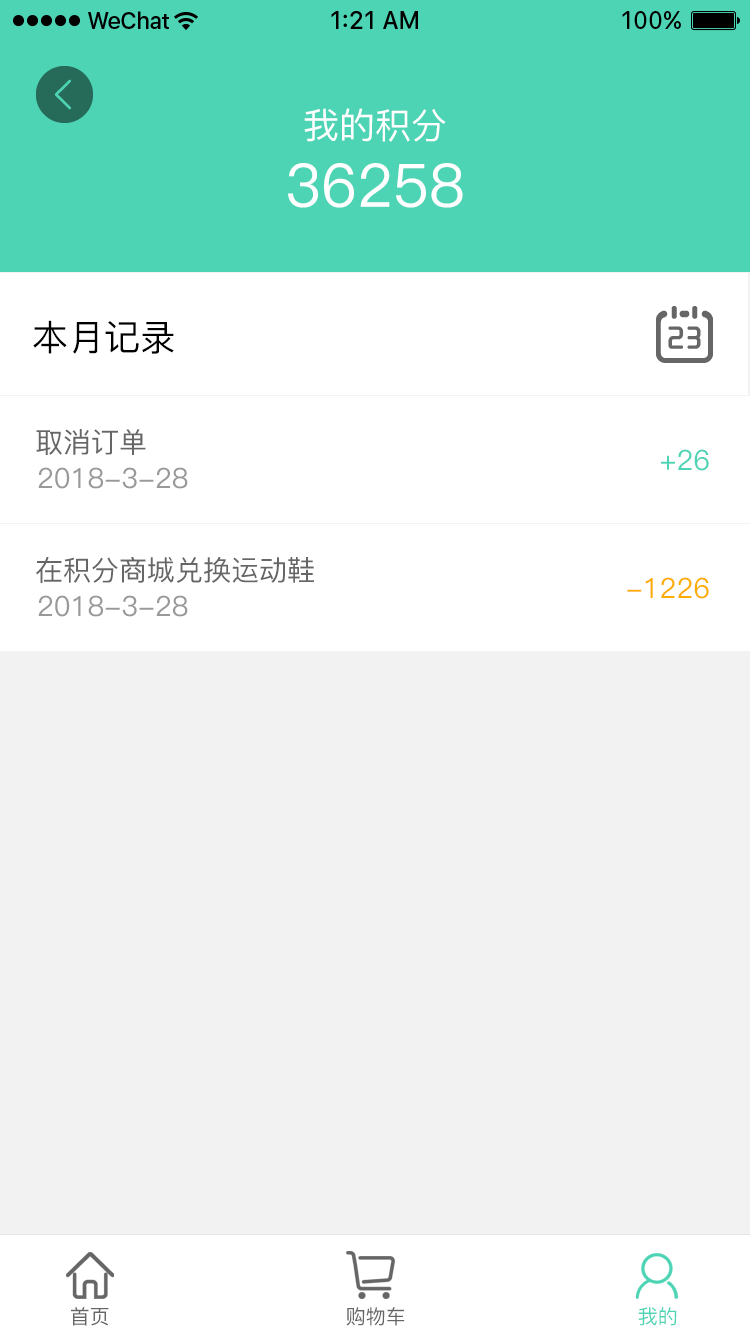
<style>
.page{position:relative;width:750px;height:1334px;background:#f2f2f2}
.page>*{position:absolute;margin:0}
.t1{font:60px/48px "PingFang-SC-Medium";color:#ffffff}
.t2{font:36px/48px "PingFang-SC-Medium";color:#ffffff}
.t3{font:36px "PingFang-SC-Medium";color:#000000}
.t4{font:28px "PingFang-SC-Medium";color:#666666}
.t5{font:28px "PingFang-SC-Medium";color:#4dd4b4}
.t6{font:28px "PingFang-SC-Medium";color:#999999}
.t7{font:28px "PingFang-SC-Medium";color:#fdad02}
.t8{font:20px "PingFang-SC-Medium";color:#666666}
.t9{font:20px "PingFang-SC-Medium";color:#4cd4b4}
</style>
<div class="page">
<p class="t1" style="left:288px;top:108px;width:175px;height:100px;text-align:center"><span class="t2">我的积分<br></span>36258</p>
<p class="t3" style="left:33px;top:320px;width:141px;height:34px">本月记录</p>
<p class="t4" style="left:36px;top:429px;width:110px;height:26px">取消订单</p>
<p class="t5" style="left:661px;top:449px;width:48px;height:22px">+26</p>
<p class="t6" style="left:38px;top:467px;width:150px;height:22px">2018-3-28</p>
<p class="t4" style="left:36px;top:556px;width:278px;height:27px">在积分商城兑换运动鞋</p>
<p class="t7" style="left:627px;top:577px;width:82px;height:22px">-1226</p>
<p class="t6" style="left:38px;top:595px;width:150px;height:22px">2018-3-28</p>
<p class="t8" style="left:71px;top:1307px;width:38px;height:19px">首页</p>
<p class="t8" style="left:346px;top:1307px;width:59px;height:19px">购物车</p>
<p class="t9" style="left:638px;top:1307px;width:39px;height:19px">我的</p>
</div>
